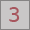
<style>
.page{position:relative;width:30px;height:30px;background:#c9c7c7}
.page>*{position:absolute;margin:0}
.t1{font:20.8px "Menlo-Regular";color:#a7555d}
</style>
<div class="page">
<p class="t1" style="left:9px;top:7px;width:11px;height:15px">3</p>
</div>
